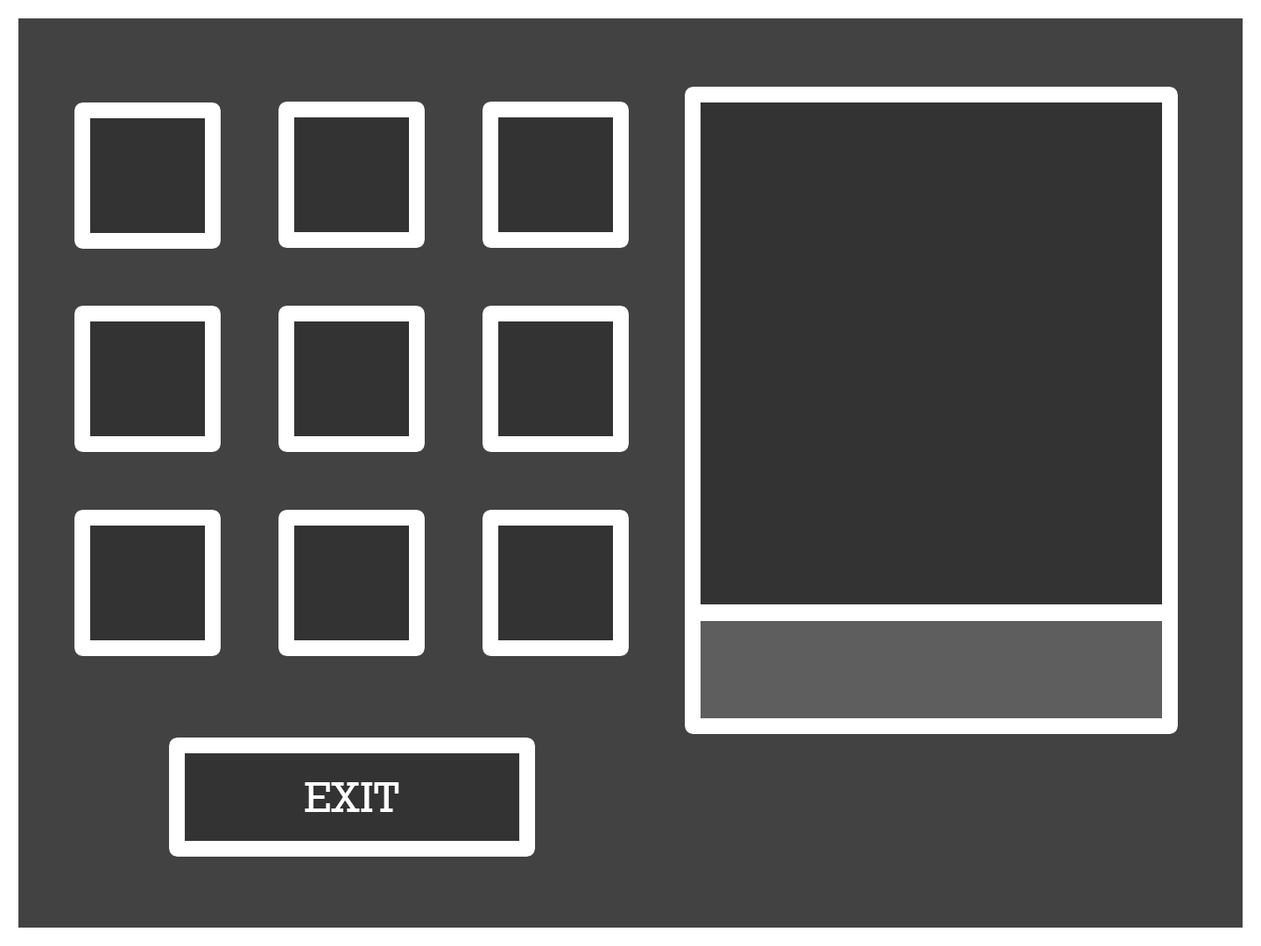
<style>
.page{position:relative;width:1261px;height:946px;background:#424242}
.page>*{position:absolute;margin:0}
.t1{font:43.8px "Rockwell";color:#ffffff}
</style>
<div class="page">
<p class="t1" style="left:305px;top:782px;width:94px;height:30px">EXIT</p>
</div>
